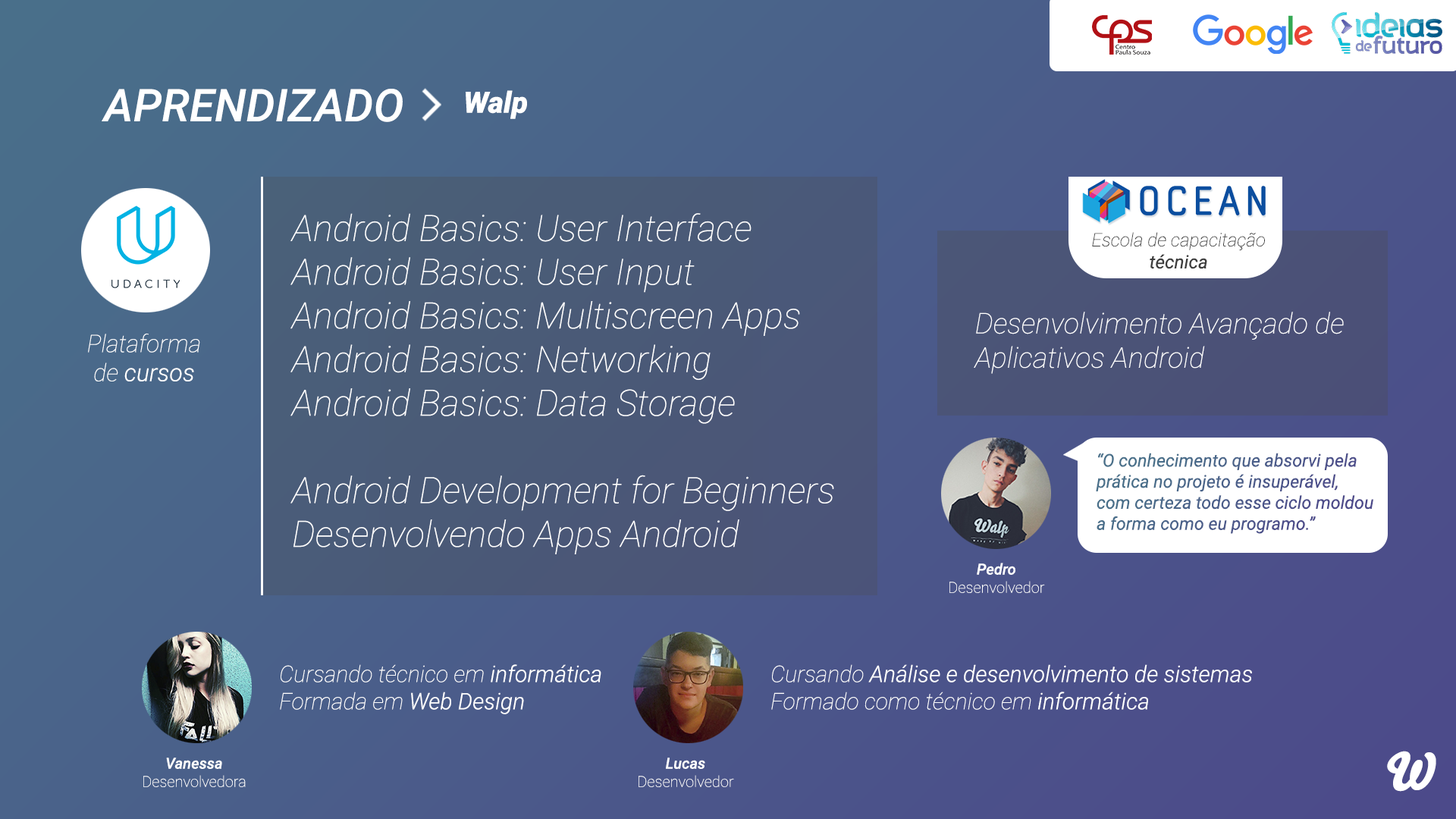
<style>
.page{position:relative;width:1456px;height:819px}
.page>*{position:absolute;margin:0}
.t1{font:45.2px "Roboto-MediumItalic";color:#ffffff}
.t2{font:29.5px "Roboto-BlackItalic";color:#ffffff}
.t3{font:36.4px "Roboto-ThinItalic";color:#ffffff}
.t4{font:18.4px "Roboto-ThinItalic";color:#3d3d3d}
.t5{font:18.4px "Roboto-Italic";color:#3d3d3d}
.t6{font:28.6px "Roboto-ThinItalic";color:#ffffff}
.t7{font:24.2px "Roboto-ThinItalic";color:#ffffff}
.t8{font:24.2px "Roboto-LightItalic";color:#ffffff}
.t9{font:17.5px "Roboto-Italic";color:#4a608a}
.t10{font:15.2px "Roboto-Thin";color:#ffffff}
.t11{font:15.2px "Roboto-MediumItalic";color:#ffffff}
.t12{font:22.7px "Roboto-ThinItalic";color:#ffffff}
.t13{font:22.7px "Roboto-LightItalic";color:#ffffff}
.t14{font:50.8px "Bello-Pro";color:#ffffff}
</style>
<div class="page">
<p class="t1" style="left:102px;top:89px;width:301px;height:33px">APRENDIZADO</p>
<p class="t2" style="left:466px;top:90px;width:61px;height:29px">Walp</p>
<p class="t3" style="left:290px;top:213px;width:544px;height:341px">Android Basics: User Interface<br>Android Basics: User Input<br>Android Basics: Multiscreen Apps<br>Android Basics: Networking<br>Android Basics: Data Storage<br><br>Android Development for Beginners<br>Desenvolvendo Apps Android</p>
<p class="t4" style="left:1092px;top:232px;width:173px;height:37px;text-align:center">Escola de capacitação<br><span class="t5">técnica</span></p>
<p class="t6" style="left:974px;top:312px;width:370px;height:62px">Desenvolvimento Avançado de <br>Aplicativos Android</p>
<p class="t7" style="left:88px;top:333px;width:112px;height:48px;text-align:center">Plataforma de <span class="t8">cursos</span></p>
<p class="t9" style="left:1096px;top:453px;width:277px;height:81px">“O conhecimento que absorvi pela prática no projeto é insuperável, com certeza todo esse ciclo moldou a forma como eu programo.”</p>
<p class="t10" style="left:949px;top:563px;width:96px;height:30px;text-align:center"><span class="t11">Pedro<br></span>Desenvolvedor</p>
<p class="t12" style="left:280px;top:664px;width:321px;height:50px">Cursando técnico em <span class="t13">informática<br></span>Formada em <span class="t13">Web Design</span></p>
<p class="t13" style="left:771px;top:664px;width:481px;height:46px"><span class="t12">Cursando </span>Análise e desenvolvimento de sistemas<br><span class="t12">Formado como técnico em </span>informática</p>
<p class="t10" style="left:143px;top:758px;width:103px;height:29px;text-align:center"><span class="t11">Vanessa<br></span>Desenvolvedora</p>
<p class="t10" style="left:639px;top:758px;width:95px;height:29px;text-align:center"><span class="t11">Lucas<br></span>Desenvolvedor</p>
<p class="t14" style="left:1387px;top:751px;width:49px;height:41px">W</p>
</div>
